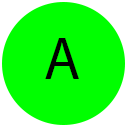
<style>
.page{position:relative;width:128px;height:128px;background:#00ff00}
.page>*{position:absolute;margin:0}
.t1{font:60px "MyriadPro-Regular";color:#000000}
</style>
<div class="page">
<p class="t1" style="left:45px;top:38px;width:34px;height:41px">A</p>
</div>
